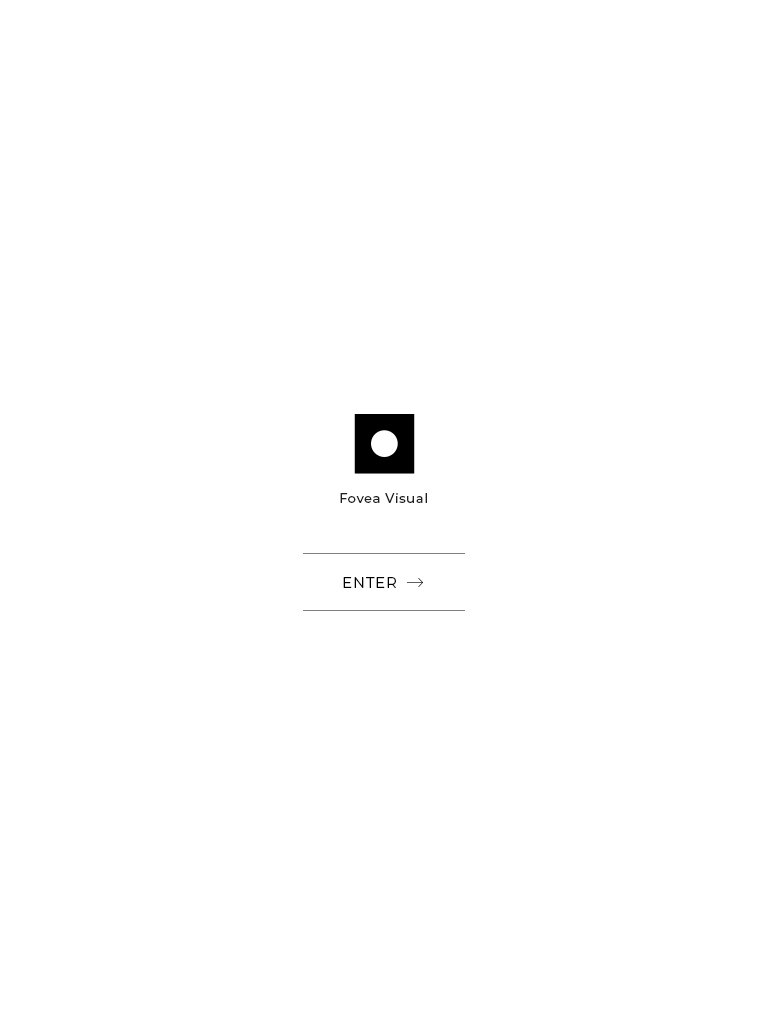
<style>
.page{position:relative;width:768px;height:1024px;background:#ffffff}
.page>*{position:absolute;margin:0}
.t1{font:13px "Montserrat-Medium";letter-spacing:0.05em;color:#202020}
.t2{font:15px "Montserrat-Regular";letter-spacing:0.05em;color:#000000;text-transform:uppercase}
</style>
<div class="page">
<p class="t1" style="left:340px;top:493px;width:87px;height:10px">Fovea Visual</p>
<p class="t2" style="left:343px;top:577px;width:53px;height:11px">Enter</p>
</div>
